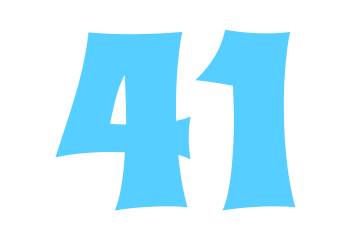
<style>
.page{position:relative;width:354px;height:236px;background:#ffffff}
.page>*{position:absolute;margin:0}
.t1{font:250px "SpicyRice-Regular";color:#56ceff}
</style>
<div class="page">
<p class="t1" style="left:55px;top:29px;width:241px;height:182px">41</p>
</div>
